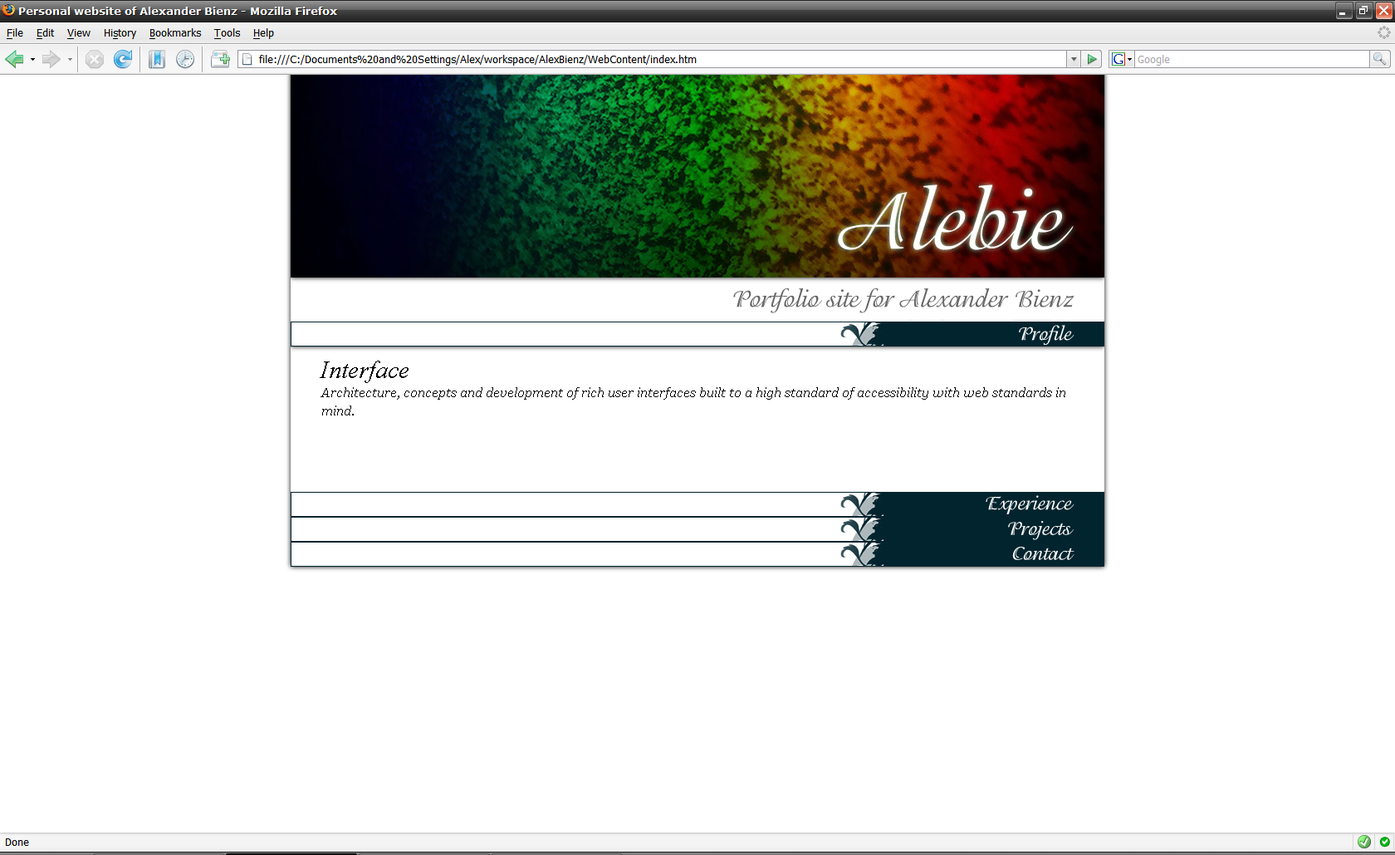
<style>
.page{position:relative;width:1395px;height:855px;background:#ffffff}
.page>*{position:absolute;margin:0}
.t1{font:24.9px "Adorable-";color:#666666}
.t2{font:19.9px "Adorable-";color:#ffffff}
.t3{font:24.9px "TimesNewRomanPS-ItalicMT";color:#000000}
.t4{font:13.3px/1.7px "Georgia-Italic";color:#000000}
</style>
<div class="page">
<p class="t1" style="left:733px;top:288px;width:342px;height:25px">Portfolio site for Alexander Bienz</p>
<p class="t2" style="left:1019px;top:325px;width:56px;height:20px">Profile</p>
<p class="t3" style="left:320px;top:360px;width:89px;height:23px">Interface</p>
<p class="t4" style="left:321px;top:387px;width:745px;height:28px">Architecture, concepts and development of rich user interfaces built to a high standard of accessibility with web standards in<br>mind.</p>
<p class="t2" style="left:986px;top:495px;width:89px;height:19px">Experience</p>
<p class="t2" style="left:1008px;top:521px;width:66px;height:19px">Projects</p>
<p class="t2" style="left:1012px;top:546px;width:63px;height:14px">Contact</p>
</div>
